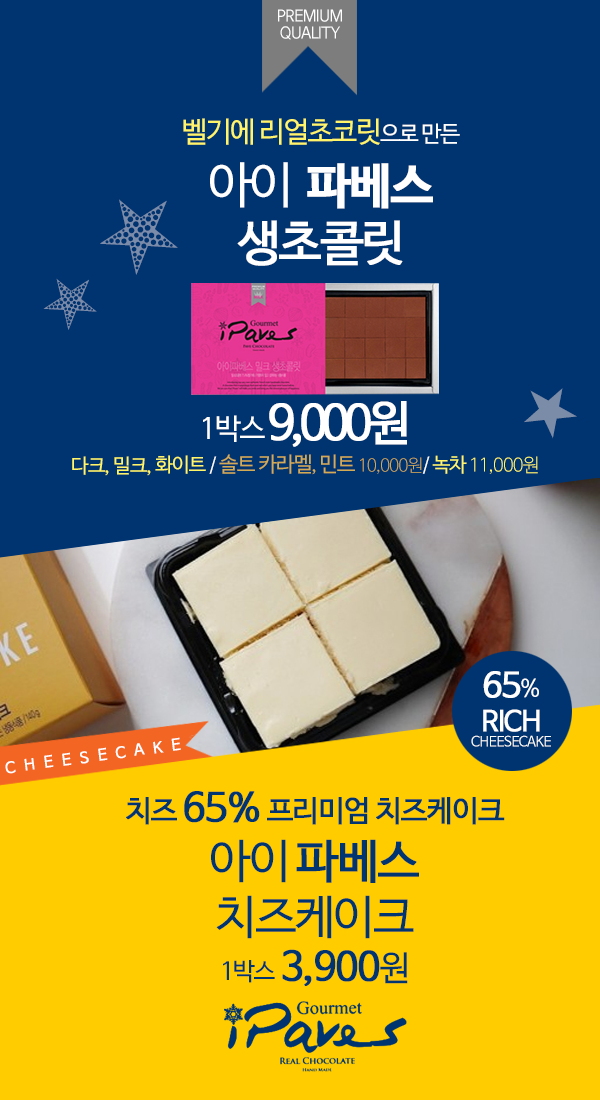
<style>
.page{position:relative;width:600px;height:1100px;background:#003470}
.page>*{position:absolute;margin:0}
.t1{font:15.9px "NanumBarunGothic";letter-spacing:-0.05em;color:#ffffff}
.t2{font:15.9px/11.4px "NanumBarunGothic";letter-spacing:-0.05em;color:#ffffff}
.t3{font:28.8px "NanumBarunGothic";letter-spacing:-0.05em;color:#fff46a}
.t4{font:22.4px "NanumBarunGothic";letter-spacing:-0.05em;color:#ffffff}
.t5{font:49.7px "NanumBarunGothic";letter-spacing:-0.05em;color:#ffffff}
.t6{font:48.1px "NanumBarunGothicBold";letter-spacing:-0.05em;color:#ffffff;font-weight:bold}
.t7{font:48.1px "NanumBarunGothic";letter-spacing:-0.05em;color:#ffffff;font-weight:bold}
.t8{font:87.5px "NanumMyeongjoEco";letter-spacing:-0.05em;color:#7b8caa}
.t9{font:59.3px "NanumMyeongjoEco";letter-spacing:-0.05em;color:#7b8caa}
.t10{font:57.6px "NanumBarunGothic";letter-spacing:-0.05em;color:#7b8ca8}
.t11{font:19.8px "NanumBarunGothic";letter-spacing:-0.05em;color:#fff568}
.t12{font:29px "NanumBarunGothic";letter-spacing:-0.05em;color:#ffffff}
.t13{font:47.5px "NanumBarunGothic";letter-spacing:-0.13em;color:#ffffff;font-weight:bold}
.t14{font:18.5px "NanumBarunGothic";letter-spacing:-0.05em;color:#ffffff}
.t15{font:21.1px "NanumBarunGothic";letter-spacing:-0.05em;color:#d3ab54}
.t16{font:18.5px "NanumBarunGothic";letter-spacing:-0.05em;color:#d3ab54}
.t17{font:17.1px "NanumBarunGothicLight";letter-spacing:-0.05em;color:#d3ab54}
.t18{font:19.8px "NanumBarunGothic";letter-spacing:-0.05em;color:#fff66b}
.t19{font:18.5px "NanumBarunGothicLight";letter-spacing:-0.05em;color:#fff66b}
.t20{font:14px "NanumBarunGothic";letter-spacing:-0.05em;color:#fefefe}
.t21{font:34px "NanumBarunGothic";letter-spacing:-0.05em;color:#fefefe;font-weight:bold}
.t22{font:24px "NanumBarunGothic";letter-spacing:-0.05em;color:#fefefe}
.t23{font:28px "NanumBarunGothic";letter-spacing:-0.05em;color:#fefefe;font-weight:bold}
.t24{font:15px "NanumBarunGothic";letter-spacing:0.51em;color:#ffffff;font-weight:bold;scale:1.07 1}
.t25{font:29.4px "NanumBarunGothic";letter-spacing:-0.05em;color:#003571;font-weight:bold}
.t26{font:39.2px "NanumBarunGothic";letter-spacing:-0.05em;color:#003571;font-weight:bold}
.t27{font:46.5px "NanumBarunGothic";letter-spacing:-0.05em;color:#003571}
.t28{font:46.5px "NanumBarunGothic";letter-spacing:-0.05em;color:#003571;font-weight:bold}
.t29{font:24.5px "NanumBarunGothic";letter-spacing:-0.05em;color:#003571}
.t30{font:34.3px "NanumBarunGothic";letter-spacing:-0.05em;color:#003571}
</style>
<div class="page">
<p class="t1" style="left:278px;top:9px;width:64px;height:31px;text-align:center">PREMIUM<br><span class="t2">QUALITY</span></p>
<p class="t3" style="left:183px;top:118px;width:277px;height:148px;text-align:center">벨기에 리얼초코릿<span class="t4">으로 만든<br></span><span class="t5">아이</span><span class="t6">파베스<br></span><span class="t7">생초콜릿</span></p>
<p class="t8" style="left:100px;top:199px;width:78px;height:76px;rotate:-33deg">★</p>
<p class="t9" style="left:43px;top:278px;width:54px;height:52px;rotate:-33deg">★</p>
<p class="t10" style="left:524px;top:388px;width:53px;height:51px;rotate:29deg">★</p>
<p class="t11" style="left:72px;top:401px;width:466px;height:75px;text-align:center"><span class="t12">1박스 </span><span class="t13">9,000원<br></span>다크, 밀크, 화이트 <span class="t14">/ </span><span class="t15">솔트 카라멜</span><span class="t16">, </span><span class="t15">민트 </span><span class="t17">10,000원</span><span class="t14">/ </span><span class="t18">녹차 </span><span class="t19">11,000원</span></p>
<p class="t20" style="left:471px;top:671px;width:80px;height:76px;text-align:center"><span class="t21">65</span><span class="t22">%<br></span><span class="t23">RICH<br></span>CHEESECAKE</p>
<p class="t24" style="left:5px;top:737px;width:176px;height:37px;rotate:-8deg">CHEESECAKE</p>
<p class="t25" style="left:126px;top:791px;width:379px;height:195px;text-align:center">치즈 <span class="t26">65% </span>프리미엄 치즈케이크<br><span class="t27">아이 </span><span class="t28">파베스<br></span><span class="t27">치즈케이크<br></span><span class="t29">1박스 </span><span class="t26">3,900</span><span class="t30">원</span></p>
</div>
